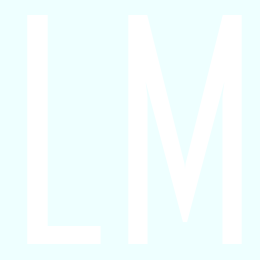
<style>
.page{position:relative;width:260px;height:260px;background:#eeffff}
.page>*{position:absolute;margin:0}
.t1{font:300px "AgencyFB-Reg";color:#ffffff}
</style>
<div class="page">
<p class="t1" style="left:27px;top:15px;width:215px;height:229px">LM</p>
</div>
